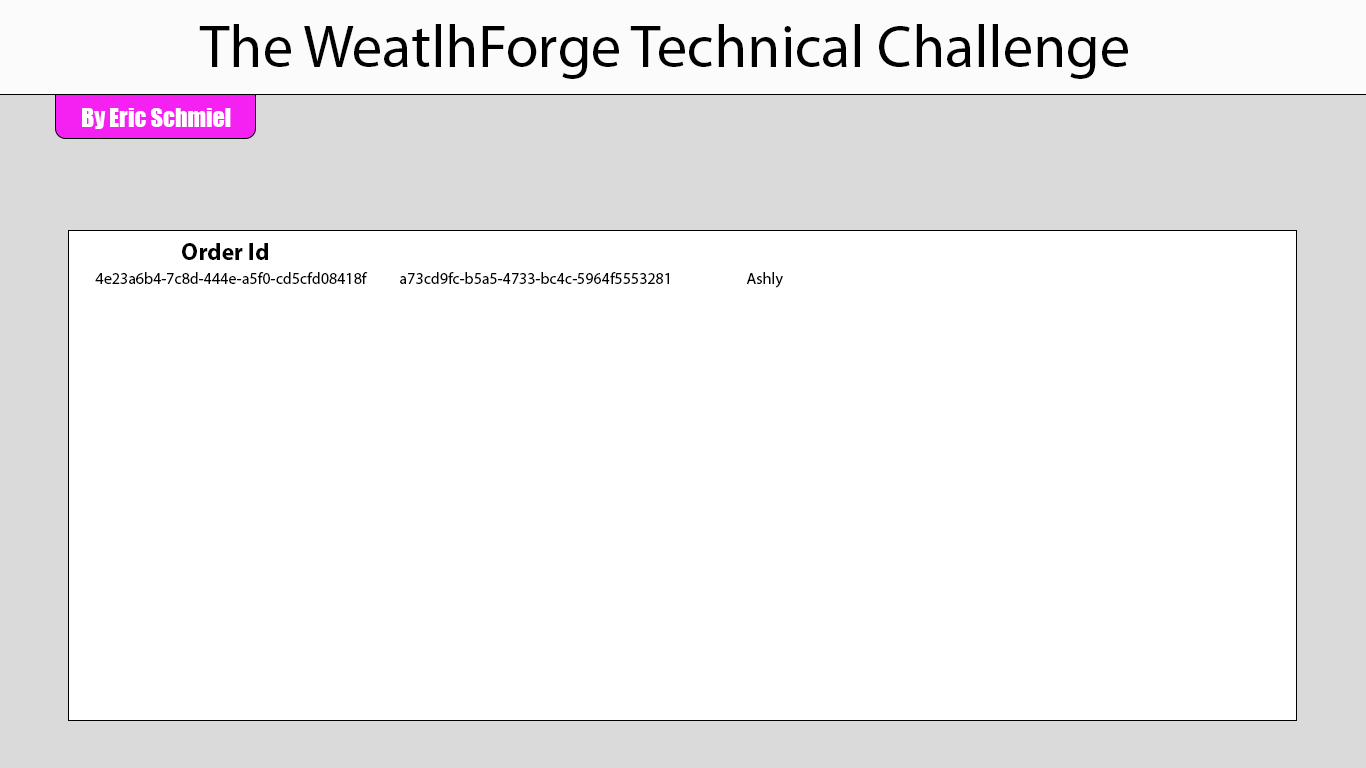
<style>
.page{position:relative;width:1366px;height:768px;background:#ffffff}
.page>*{position:absolute;margin:0}
.t1{font:60px "MyriadPro-Regular";color:#000000}
.t2{font:24px "Impact";color:#ffffff}
.t3{font:24px "MyriadPro-Bold";color:#000000}
.t4{font:16px "MyriadPro-Regular";color:#000000}
</style>
<div class="page">
<p class="t1" style="left:199px;top:24px;width:929px;height:55px">The WeatlhForge Technical Challenge</p>
<p class="t2" style="left:82px;top:108px;width:149px;height:21px">By Eric Schmiel</p>
<p class="t3" style="left:182px;top:243px;width:86px;height:17px">Order Id</p>
<p class="t4" style="left:95px;top:272px;width:273px;height:12px">4e23a6b4-7c8d-444e-a5f0-cd5cfd08418f</p>
<p class="t4" style="left:400px;top:272px;width:269px;height:12px">a73cd9fc-b5a5-4733-bc4c-5964f5553281</p>
<p class="t4" style="left:746px;top:272px;width:37px;height:16px">Ashly</p>
</div>
